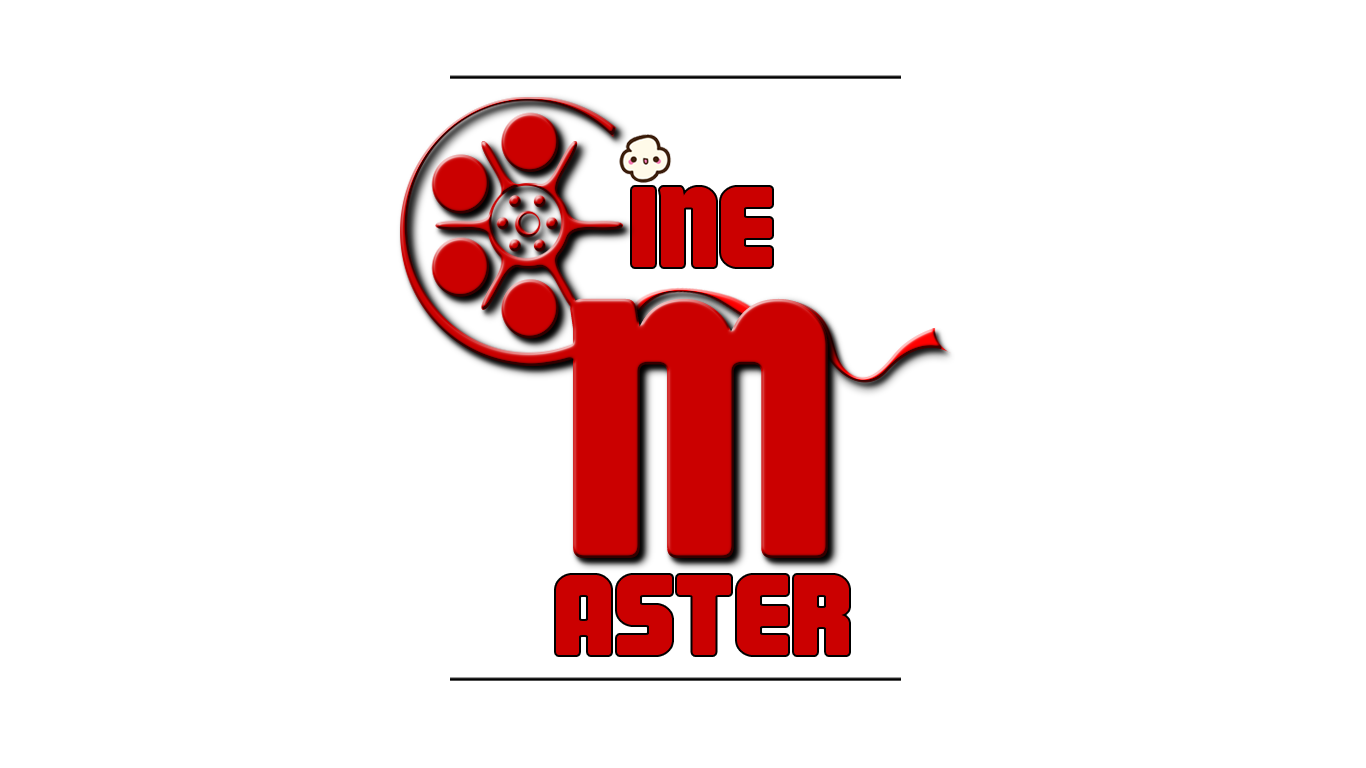
<style>
.page{position:relative;width:1366px;height:768px;background:#ffffff}
.page>*{position:absolute;margin:0}
.t1{font:114.4px "Magnum";color:#cb0000;scale:1.13 1}
</style>
<div class="page">
<p class="t1" style="left:632px;top:187px;width:140px;height:80px">INE</p>
<p class="t1" style="left:556px;top:575px;width:293px;height:80px">ASTER</p>
</div>
